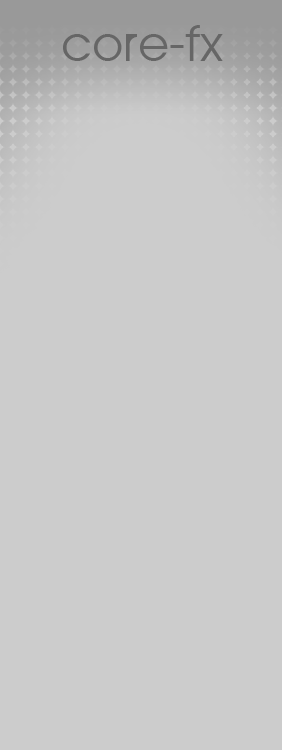
<style>
.page{position:relative;width:282px;height:750px;background:#cccccc}
.page>*{position:absolute;margin:0}
.t1{font:48px "SeraphicOrganism";color:#666666}
</style>
<div class="page">
<p class="t1" style="left:63px;top:25px;width:160px;height:36px">core-fx</p>
</div>
